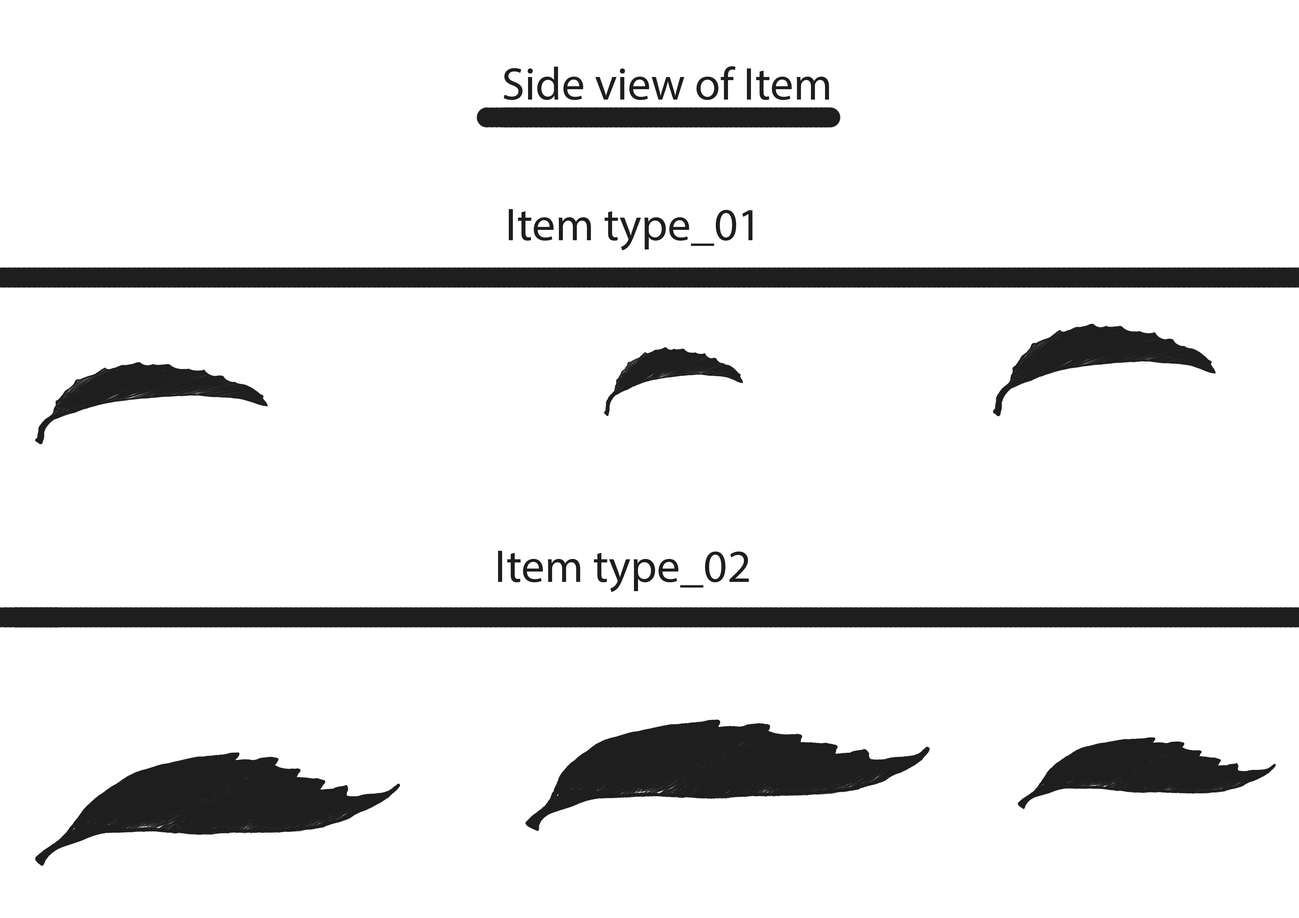
<style>
.page{position:relative;width:1299px;height:918px;background:#ffffff}
.page>*{position:absolute;margin:0}
.t1{font:46.3px "MyriadPro-Regular";color:#1e1e1e}
</style>
<div class="page">
<p class="t1" style="left:504px;top:66px;width:325px;height:34px">Side view of Item</p>
<p class="t1" style="left:509px;top:209px;width:243px;height:42px">Item type_01</p>
<p class="t1" style="left:498px;top:551px;width:251px;height:41px">Item type_02</p>
</div>
